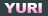
<style>
.page{position:relative;width:48px;height:16px;background:#314242}
.page>*{position:absolute;margin:0}
.t1{font:12.9px "Arial-Black";scale:1.07 1}
</style>
<div class="page">
<p class="t1" style="left:4px;top:3px;width:38px;height:10px">YURI</p>
</div>
